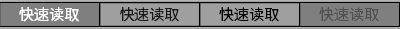
<style>
.page{position:relative;width:400px;height:29px;background:#7f7f7f}
.page>*{position:absolute;margin:0}
.t1{font:15px "SourceHanSansSC-Normal";color:#ffffff}
.t2{font:15px "SourceHanSansSC-Normal";color:#191919}
.t3{font:15px "SourceHanSansSC-Normal";color:#000000}
.t4{font:15px "SourceHanSansSC-Normal";color:#505050}
</style>
<div class="page">
<p class="t1" style="left:19px;top:7px;width:60px;height:15px">快速读取</p>
<p class="t2" style="left:120px;top:7px;width:59px;height:15px">快速读取</p>
<p class="t3" style="left:219px;top:7px;width:60px;height:15px">快速读取</p>
<p class="t4" style="left:319px;top:7px;width:60px;height:15px">快速读取</p>
</div>
